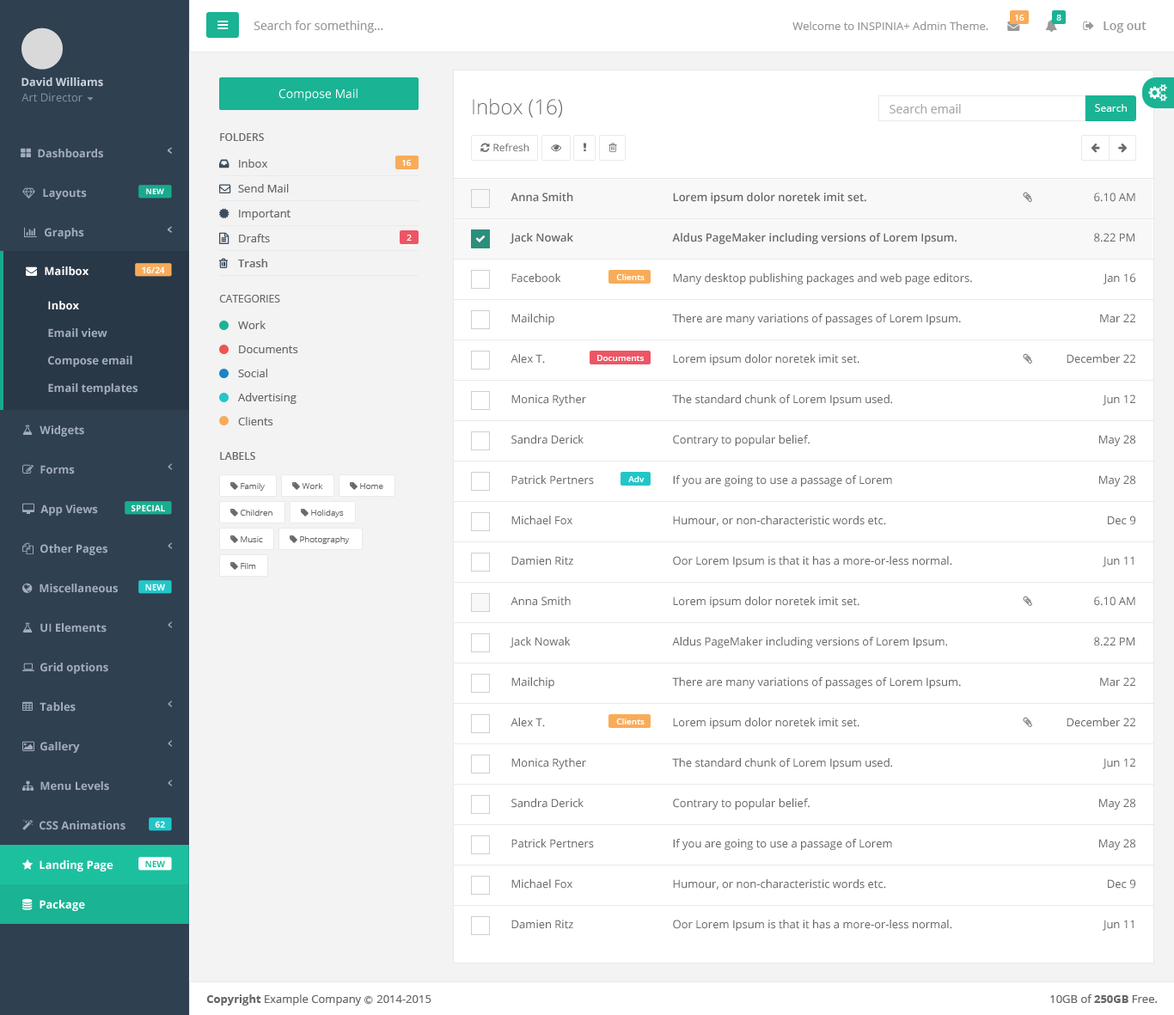
<style>
.page{position:relative;width:1174px;height:1015px;background:#ffffff}
.page>*{position:absolute;margin:0}
.t1{font:8.6px "OpenSans-Semibold";color:#ffffff}
.t2{font:12px "OpenSans";color:#999999}
.t3{font:11.2px "OpenSans";color:#999999}
.t4{font:12px "OpenSans-Semibold";color:#999999}
.t5{font:11.2px "OpenSans-Bold";color:#cad1db}
.t6{font:12px "OpenSans";color:#ffffff}
.t7{font:11.2px "OpenSans";color:#7d93a5}
.t8{font:20.6px "OpenSans-Light";color:#676a6c}
.t9{font:12px "OpenSans";color:#a9a9a9}
.t10{font:10.3px "OpenSans";color:#ffffff}
.t11{font:10.3px "OpenSans-Semibold";color:#676a6c}
.t12{font:11.2px "OpenSans-Bold";color:#a2acbd}
.t13{font:10.3px "OpenSans";color:#676a6c}
.t14{font:11.2px "OpenSans";color:#676a6c}
.t15{font:7.7px "OpenSans-Bold";color:#fefefe}
.t16{font:11.2px "OpenSans-Semibold";color:#676a6c}
.t17{font:11.2px "OpenSans-Bold";color:#ffffff}
.t18{font:8.6px "OpenSans-Bold";color:#fefefe}
.t19{font:8.6px "OpenSans-Light";color:#676a6c}
.t20{font:8.6px "OpenSans-Bold";color:#1cc09f}
.t21{font:11.2px "OpenSans";color:#666666}
.t22{font:11.2px "OpenSans-Bold";color:#666666}
.t23{font:8.6px "Meiryo";color:#666666}
</style>
<div class="page">
<p class="t1" style="left:1015px;top:15px;width:10px;height:6px">16</p>
<p class="t1" style="left:1057px;top:15px;width:5px;height:6px">8</p>
<p class="t2" style="left:254px;top:21px;width:129px;height:12px">Search for something...</p>
<p class="t3" style="left:793px;top:21px;width:196px;height:9px">Welcome to INSPINIA+ Admin Theme.</p>
<p class="t4" style="left:1104px;top:21px;width:43px;height:12px">Log out</p>
<p class="t5" style="left:21px;top:77px;width:82px;height:10px">David Williams</p>
<p class="t6" style="left:279px;top:89px;width:79px;height:12px">Compose Mail</p>
<p class="t7" style="left:21px;top:93px;width:62px;height:9px">Art Director</p>
<p class="t8" style="left:473px;top:98px;width:89px;height:20px">Inbox (16)</p>
<p class="t9" style="left:890px;top:104px;width:71px;height:9px">Search email</p>
<p class="t10" style="left:1095px;top:104px;width:32px;height:8px">Search</p>
<p class="t11" style="left:220px;top:133px;width:44px;height:8px">FOLDERS</p>
<p class="t12" style="left:38px;top:149px;width:65px;height:9px">Dashboards</p>
<p class="t13" style="left:493px;top:144px;width:36px;height:7px">Refresh</p>
<p class="t14" style="left:239px;top:159px;width:28px;height:9px">Inbox</p>
<p class="t1" style="left:402px;top:160px;width:10px;height:6px">16</p>
<p class="t14" style="left:238px;top:184px;width:51px;height:9px">Send Mail</p>
<p class="t12" style="left:43px;top:188px;width:44px;height:11px">Layouts</p>
<p class="t15" style="left:146px;top:188px;width:18px;height:6px">NEW</p>
<p class="t16" style="left:511px;top:193px;width:62px;height:9px">Anna Smith</p>
<p class="t16" style="left:673px;top:193px;width:194px;height:11px">Lorem ipsum dolor noretek imit set.</p>
<p class="t14" style="left:1094px;top:193px;width:42px;height:9px">6.10 AM</p>
<p class="t14" style="left:239px;top:210px;width:52px;height:10px">Important</p>
<p class="t12" style="left:45px;top:228px;width:39px;height:11px">Graphs</p>
<p class="t14" style="left:239px;top:234px;width:31px;height:8px">Drafts</p>
<p class="t16" style="left:510px;top:233px;width:63px;height:11px">Jack Nowak</p>
<p class="t16" style="left:672px;top:233px;width:285px;height:11px">Aldus PageMaker including versions of Lorem Ipsum.</p>
<p class="t14" style="left:1094px;top:233px;width:41px;height:9px">8.22 PM</p>
<p class="t1" style="left:407px;top:235px;width:5px;height:6px">2</p>
<p class="t17" style="left:45px;top:267px;width:44px;height:9px">Mailbox</p>
<p class="t18" style="left:142px;top:267px;width:23px;height:6px">16/24</p>
<p class="t16" style="left:238px;top:259px;width:30px;height:8px">Trash</p>
<p class="t14" style="left:512px;top:273px;width:49px;height:10px">Facebook</p>
<p class="t1" style="left:616px;top:274px;width:29px;height:6px">Clients</p>
<p class="t14" style="left:673px;top:273px;width:299px;height:12px">Many desktop publishing packages and web page editors.</p>
<p class="t14" style="left:1103px;top:273px;width:33px;height:12px">Jan 16</p>
<p class="t17" style="left:48px;top:301px;width:31px;height:9px">Inbox</p>
<p class="t13" style="left:219px;top:295px;width:61px;height:8px">CATEGORIES</p>
<p class="t14" style="left:512px;top:314px;width:43px;height:11px">Mailchip</p>
<p class="t14" style="left:672px;top:314px;width:289px;height:11px">There are many variations of passages of Lorem Ipsum.</p>
<p class="t14" style="left:1100px;top:314px;width:36px;height:9px">Mar 22</p>
<p class="t12" style="left:48px;top:328px;width:59px;height:10px">Email view</p>
<p class="t14" style="left:238px;top:321px;width:28px;height:8px">Work</p>
<p class="t14" style="left:239px;top:346px;width:59px;height:7px">Documents</p>
<p class="t12" style="left:48px;top:356px;width:84px;height:11px">Compose email</p>
<p class="t14" style="left:511px;top:354px;width:34px;height:10px">Alex T.</p>
<p class="t1" style="left:598px;top:355px;width:46px;height:6px">Documents</p>
<p class="t14" style="left:673px;top:354px;width:187px;height:11px">Lorem ipsum dolor noretek imit set.</p>
<p class="t14" style="left:1067px;top:354px;width:69px;height:10px">December 22</p>
<p class="t14" style="left:238px;top:369px;width:29px;height:8px">Social</p>
<p class="t12" style="left:48px;top:383px;width:90px;height:12px">Email templates</p>
<p class="t14" style="left:238px;top:393px;width:59px;height:11px">Advertising</p>
<p class="t14" style="left:512px;top:395px;width:74px;height:11px">Monica Ryther</p>
<p class="t14" style="left:672px;top:395px;width:220px;height:11px">The standard chunk of Lorem Ipsum used.</p>
<p class="t14" style="left:1103px;top:395px;width:33px;height:11px">Jun 12</p>
<p class="t12" style="left:40px;top:426px;width:44px;height:11px">Widgets</p>
<p class="t14" style="left:238px;top:417px;width:35px;height:9px">Clients</p>
<p class="t14" style="left:512px;top:435px;width:72px;height:9px">Sandra Derick</p>
<p class="t14" style="left:673px;top:435px;width:137px;height:11px">Contrary to popular belief.</p>
<p class="t14" style="left:1100px;top:435px;width:36px;height:11px">May 28</p>
<p class="t11" style="left:220px;top:452px;width:35px;height:8px">LABELS</p>
<p class="t12" style="left:40px;top:465px;width:35px;height:10px">Forms</p>
<p class="t19" style="left:241px;top:483px;width:24px;height:8px">Family</p>
<p class="t19" style="left:302px;top:483px;width:21px;height:6px">Work</p>
<p class="t19" style="left:360px;top:483px;width:23px;height:6px">Home</p>
<p class="t14" style="left:512px;top:475px;width:82px;height:10px">Patrick Pertners</p>
<p class="t1" style="left:628px;top:476px;width:17px;height:6px">Adv</p>
<p class="t14" style="left:673px;top:475px;width:219px;height:12px">If you are going to use a passage of Lorem</p>
<p class="t14" style="left:1100px;top:475px;width:36px;height:12px">May 28</p>
<p class="t12" style="left:40px;top:505px;width:58px;height:11px">App Views</p>
<p class="t18" style="left:132px;top:505px;width:33px;height:7px">SPECIAL</p>
<p class="t19" style="left:241px;top:510px;width:32px;height:6px">Children</p>
<p class="t19" style="left:311px;top:510px;width:33px;height:8px">Holidays</p>
<p class="t14" style="left:512px;top:516px;width:61px;height:9px">Michael Fox</p>
<p class="t14" style="left:673px;top:516px;width:213px;height:10px">Humour, or non-characteristic words etc.</p>
<p class="t14" style="left:1108px;top:516px;width:28px;height:9px">Dec 9</p>
<p class="t12" style="left:40px;top:544px;width:67px;height:11px">Other Pages</p>
<p class="t19" style="left:241px;top:536px;width:22px;height:6px">Music</p>
<p class="t19" style="left:300px;top:536px;width:50px;height:8px">Photography</p>
<p class="t14" style="left:512px;top:556px;width:61px;height:10px">Damien Ritz</p>
<p class="t14" style="left:673px;top:556px;width:280px;height:11px">Oor Lorem Ipsum is that it has a more-or-less normal.</p>
<p class="t14" style="left:1103px;top:556px;width:31px;height:11px">Jun 11</p>
<p class="t19" style="left:241px;top:563px;width:15px;height:6px">Film</p>
<p class="t12" style="left:40px;top:584px;width:78px;height:9px">Miscellaneous</p>
<p class="t18" style="left:145px;top:584px;width:20px;height:7px">NEW</p>
<p class="t14" style="left:511px;top:597px;width:60px;height:9px">Anna Smith</p>
<p class="t14" style="left:673px;top:597px;width:187px;height:11px">Lorem ipsum dolor noretek imit set.</p>
<p class="t14" style="left:1094px;top:597px;width:42px;height:9px">6.10 AM</p>
<p class="t12" style="left:40px;top:623px;width:67px;height:10px">UI Elements</p>
<p class="t14" style="left:510px;top:637px;width:61px;height:11px">Jack Nowak</p>
<p class="t14" style="left:672px;top:637px;width:275px;height:11px">Aldus PageMaker including versions of Lorem Ipsum.</p>
<p class="t14" style="left:1094px;top:637px;width:41px;height:10px">8.22 PM</p>
<p class="t12" style="left:40px;top:663px;width:68px;height:11px">Grid options</p>
<p class="t14" style="left:512px;top:677px;width:43px;height:12px">Mailchip</p>
<p class="t14" style="left:672px;top:677px;width:289px;height:12px">There are many variations of passages of Lorem Ipsum.</p>
<p class="t14" style="left:1100px;top:677px;width:36px;height:10px">Mar 22</p>
<p class="t12" style="left:40px;top:702px;width:36px;height:10px">Tables</p>
<p class="t14" style="left:511px;top:718px;width:34px;height:9px">Alex T.</p>
<p class="t1" style="left:616px;top:719px;width:29px;height:6px">Clients</p>
<p class="t14" style="left:673px;top:718px;width:187px;height:11px">Lorem ipsum dolor noretek imit set.</p>
<p class="t14" style="left:1067px;top:718px;width:69px;height:9px">December 22</p>
<p class="t12" style="left:40px;top:742px;width:40px;height:11px">Gallery</p>
<p class="t14" style="left:512px;top:758px;width:74px;height:11px">Monica Ryther</p>
<p class="t14" style="left:672px;top:758px;width:220px;height:11px">The standard chunk of Lorem Ipsum used.</p>
<p class="t14" style="left:1103px;top:758px;width:33px;height:11px">Jun 12</p>
<p class="t12" style="left:40px;top:782px;width:69px;height:9px">Menu Levels</p>
<p class="t14" style="left:512px;top:799px;width:72px;height:9px">Sandra Derick</p>
<p class="t14" style="left:673px;top:799px;width:137px;height:11px">Contrary to popular belief.</p>
<p class="t14" style="left:1100px;top:799px;width:36px;height:11px">May 28</p>
<p class="t12" style="left:40px;top:821px;width:86px;height:10px">CSS Animations</p>
<p class="t18" style="left:155px;top:821px;width:10px;height:7px">62</p>
<p class="t14" style="left:512px;top:839px;width:82px;height:10px">Patrick Pertners</p>
<p class="t14" style="left:673px;top:839px;width:219px;height:11px">If you are going to use a passage of Lorem</p>
<p class="t14" style="left:1100px;top:839px;width:36px;height:11px">May 28</p>
<p class="t17" style="left:40px;top:861px;width:73px;height:11px">Landing Page</p>
<p class="t20" style="left:145px;top:861px;width:20px;height:6px">NEW</p>
<p class="t14" style="left:512px;top:880px;width:61px;height:9px">Michael Fox</p>
<p class="t14" style="left:673px;top:880px;width:213px;height:10px">Humour, or non-characteristic words etc.</p>
<p class="t14" style="left:1108px;top:880px;width:28px;height:9px">Dec 9</p>
<p class="t17" style="left:40px;top:900px;width:45px;height:11px">Package</p>
<p class="t14" style="left:512px;top:920px;width:61px;height:9px">Damien Ritz</p>
<p class="t14" style="left:673px;top:920px;width:280px;height:11px">Oor Lorem Ipsum is that it has a more-or-less normal.</p>
<p class="t14" style="left:1103px;top:920px;width:31px;height:11px">Jun 11</p>
<p class="t21" style="left:206px;top:995px;width:226px;height:11px"><span class="t22">Copyright</span> Example Company <span class="t23">Ⓒ </span>2014-2015</p>
<p class="t21" style="left:1051px;top:995px;width:107px;height:8px">10GB of <span class="t22">250GB</span> Free.</p>
</div>
